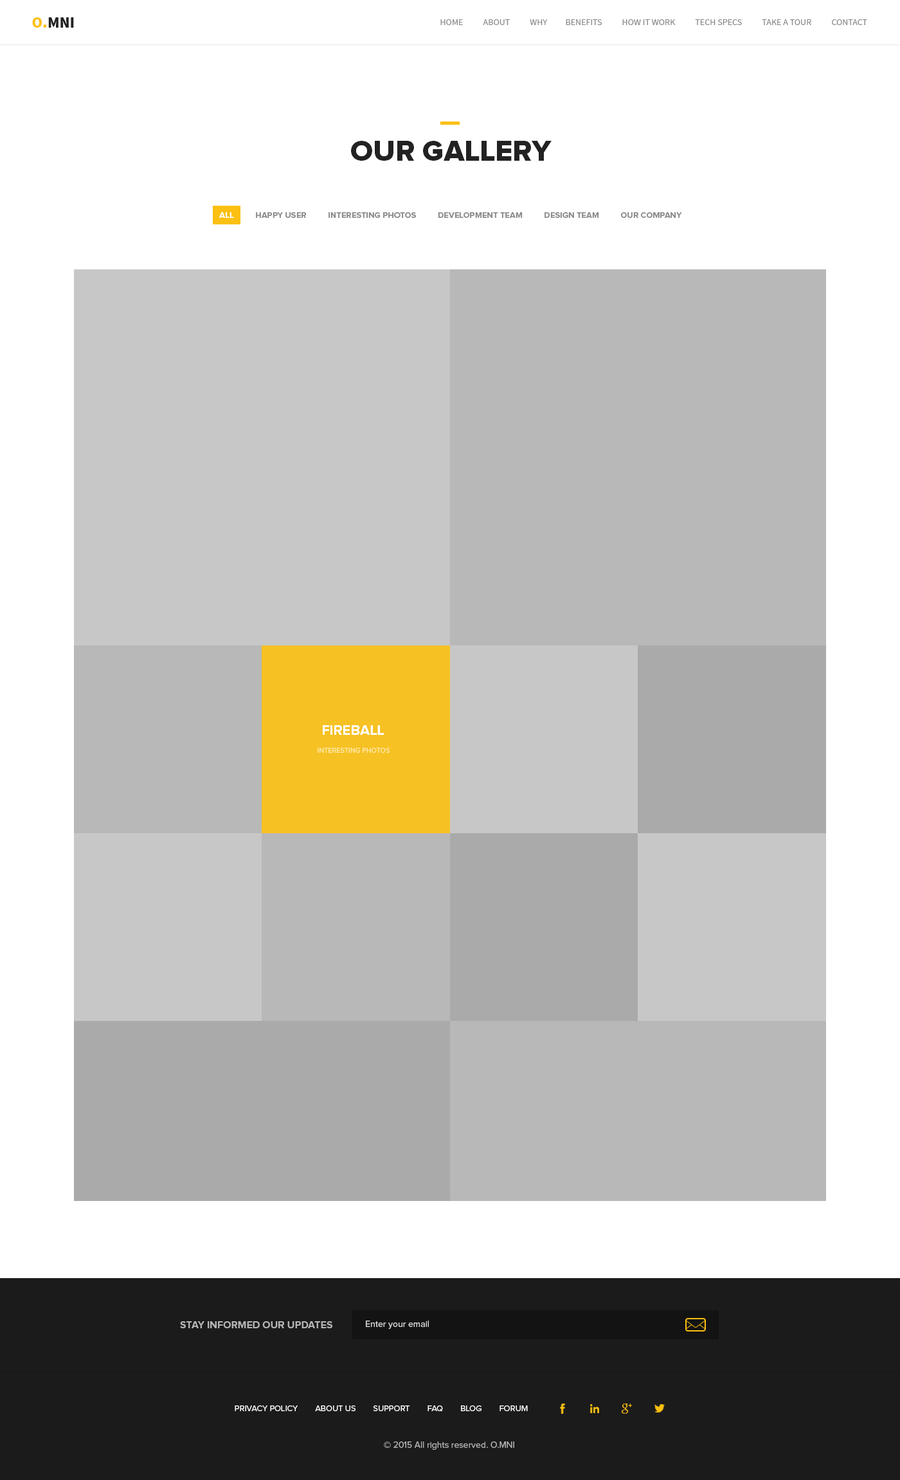
<style>
.page{position:relative;width:900px;height:1480px;background:#ffffff}
.page>*{position:absolute;margin:0}
.t1{font:15.4px "SourceSansPro-Black";color:#222222;text-transform:uppercase}
.t2{font:15.4px "SourceSansPro-Black";color:#fbc011;text-transform:uppercase}
.t3{font:9px "SourceSansPro-Regular";color:#888888;text-transform:uppercase}
.t4{font:29.6px "ProximaNova-Extrabld";color:#222222;text-transform:uppercase}
.t5{font:8.4px "ProximaNova-Bold";color:#888888;text-transform:uppercase}
.t6{font:8.4px "ProximaNova-Bold";color:#ffffff;text-transform:uppercase}
.t7{font:14.1px "ProximaNova-Bold";color:#ffffff;text-transform:uppercase}
.t8{font:7.1px "ProximaNova-Regular";color:#ffe9a7;text-transform:uppercase}
.t9{font:10.3px "ProximaNova-Bold";color:#b4b4b4;text-transform:uppercase}
.t10{font:9px "ProximaNova-Regular";color:#dddddd}
.t11{font:8.4px "ProximaNova-Regular";color:#ffffff;text-transform:uppercase}
.t12{font:9px "ProximaNova-Regular";color:#b4b4b4}
</style>
<div class="page">
<p class="t1" style="left:32px;top:17px;width:42px;height:11px"><span class="t2">o.</span>mni</p>
<p class="t3" style="left:440px;top:19px;width:427px;height:6px">Home           about           Why          benefits           how it work           tech specs           take a tour           contact</p>
<p class="t4" style="left:351px;top:141px;width:201px;height:20px">our gallery</p>
<p class="t5" style="left:219px;top:212px;width:463px;height:6px"><span class="t6">all </span>         happy user          interesting photos          development team          design team          our company</p>
<p class="t7" style="left:323px;top:725px;width:61px;height:10px">fireball</p>
<p class="t8" style="left:318px;top:748px;width:72px;height:5px">interesting photos</p>
<p class="t9" style="left:180px;top:1321px;width:152px;height:7px">Stay informed our updates</p>
<p class="t10" style="left:366px;top:1320px;width:63px;height:9px">Enter your email</p>
<p class="t11" style="left:235px;top:1405px;width:293px;height:7px">Privacy Policy        About Us        Support        FAQ        Blog        Forum</p>
<p class="t12" style="left:384px;top:1441px;width:130px;height:9px">© 2015 All rights reserved. O.MNI</p>
</div>
